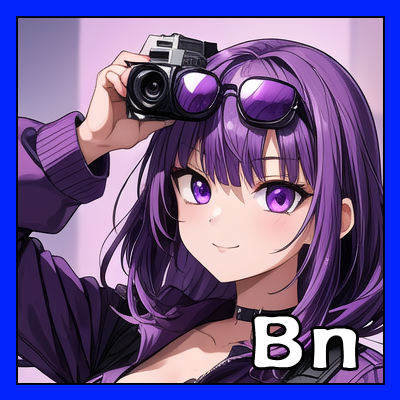
<style>
.page{position:relative;width:400px;height:400px}
.page>*{position:absolute;margin:0}
.t1{font:74.2px "YetR-HM";color:#ffffff;font-weight:bold;scale:1.33 1}
</style>
<div class="page">
<p class="t1" style="left:253px;top:315px;width:105px;height:55px">Bn</p>
</div>
